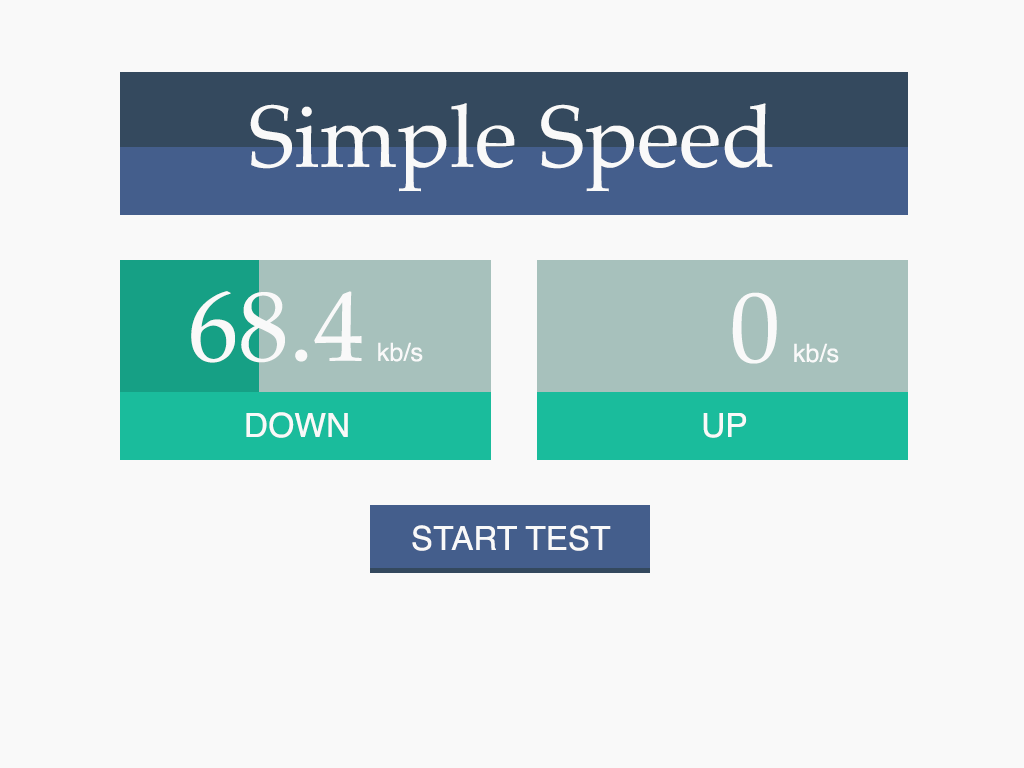
<style>
.page{position:relative;width:1024px;height:768px;background:#f9f9f9}
.page>*{position:absolute;margin:0}
.t1{font:87.5px "Palatino-Roman";color:#f9f9f9}
.t2{font:100px "Palatino-Roman";color:#f9f9f9}
.t3{font:25px "Helvetica";color:#f9f9f9}
.t4{font:33.3px "Helvetica";color:#f9f9f9}
</style>
<div class="page">
<p class="t1" style="left:250px;top:103px;width:523px;height:89px">Simple Speed</p>
<p class="t2" style="left:191px;top:291px;width:232px;height:72px">68.4 <span class="t3">kb/s</span></p>
<p class="t3" style="left:732px;top:292px;width:107px;height:72px"><span class="t2">0 </span>kb/s</p>
<p class="t4" style="left:246px;top:412px;width:102px;height:26px">DOWN</p>
<p class="t4" style="left:703px;top:413px;width:44px;height:25px">UP</p>
<p class="t4" style="left:412px;top:525px;width:199px;height:26px">START TEST</p>
</div>
